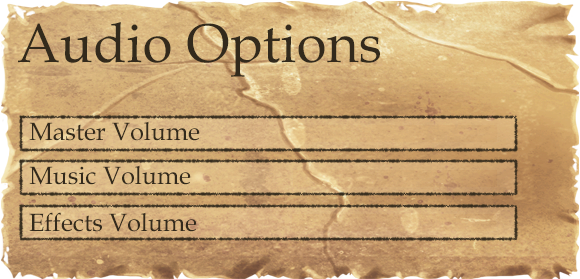
<style>
.page{position:relative;width:580px;height:279px}
.page>*{position:absolute;margin:0}
.t1{font:55px "BookAntiqua";color:#332a1c}
.t2{font:25px "BookAntiqua";color:#332a1c}
</style>
<div class="page">
<p class="t1" style="left:18px;top:22px;width:362px;height:55px">Audio Options</p>
<p class="t2" style="left:29px;top:121px;width:171px;height:20px">Master Volume</p>
<p class="t2" style="left:29px;top:165px;width:162px;height:20px">Music Volume</p>
<p class="t2" style="left:29px;top:212px;width:168px;height:20px">Effects Volume</p>
</div>
